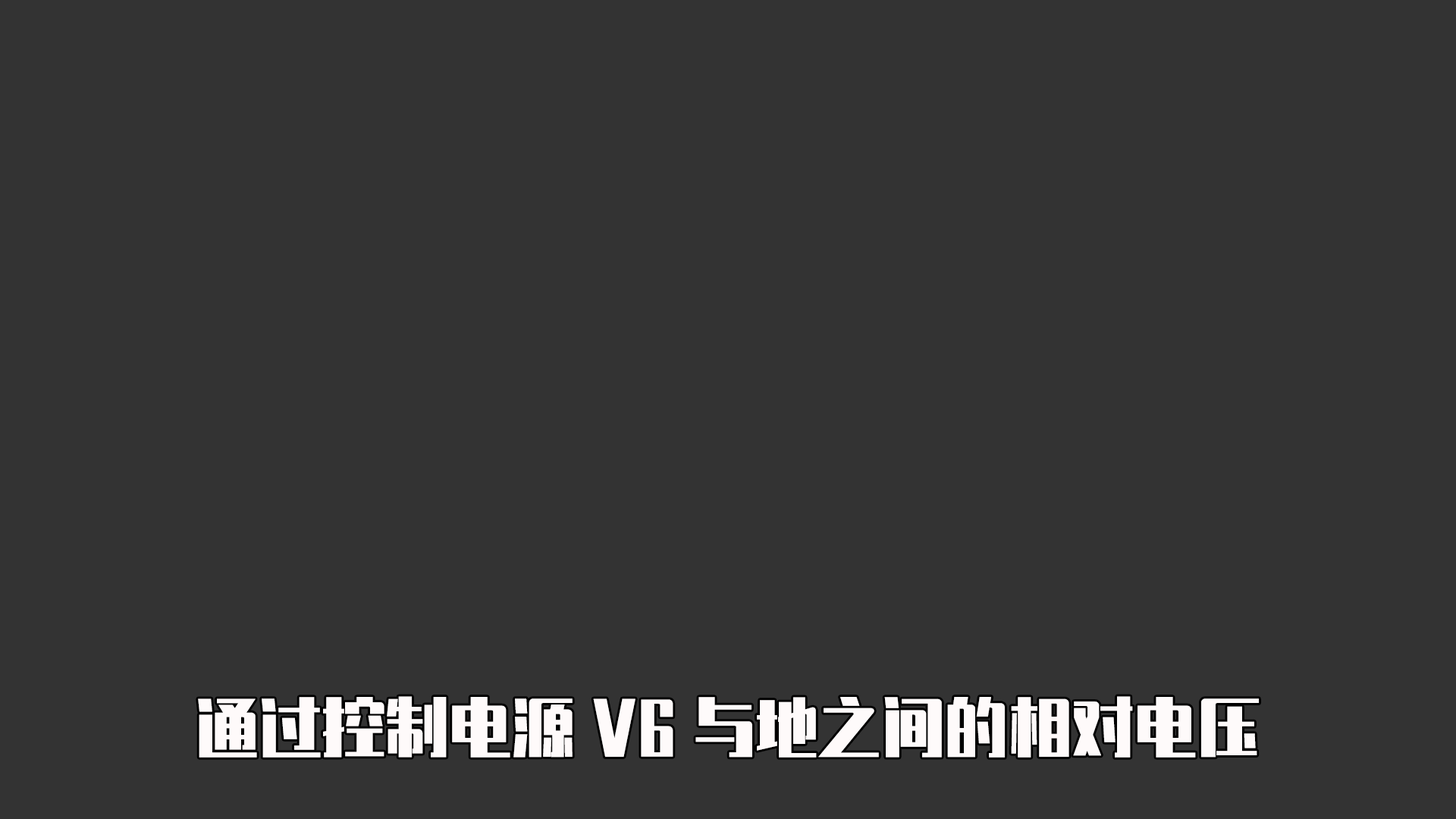
<style>
.page{position:relative;width:1456px;height:819px;background:#333333}
.page>*{position:absolute;margin:0}
.t1{font:63.2px "ZhenyanGB-Regular";color:#fefafa}
</style>
<div class="page">
<p class="t1" style="left:198px;top:696px;width:1061px;height:62px">通过控制电源V6与地之间的相对电压</p>
</div>
